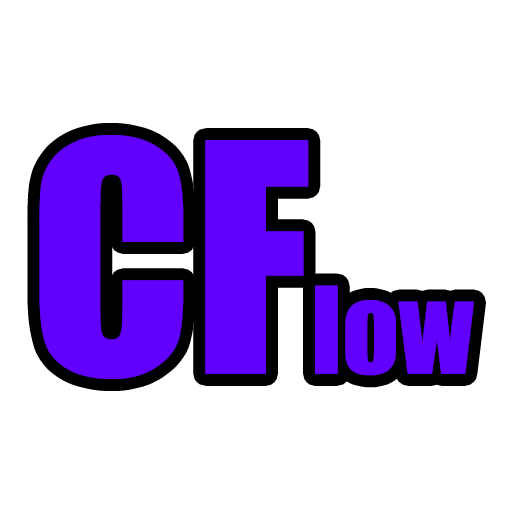
<style>
.page{position:relative;width:512px;height:512px;background:#ffffff}
.page>*{position:absolute;margin:0}
.t1{font:112px "Impact";color:#6200ff}
.t2{font:296px "Impact";color:#6200ff}
</style>
<div class="page">
<p class="t1" style="left:39px;top:135px;width:435px;height:244px"><span class="t2">CF</span>low</p>
</div>
